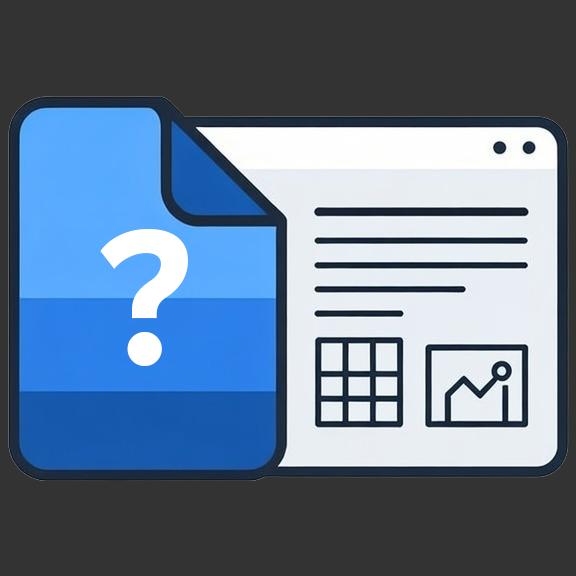
<style>
.page{position:relative;width:576px;height:576px;background:#333333}
.page>*{position:absolute;margin:0}
.t1{font:192px "CascadiaMonoRoman-Bold";color:#ffffff}
</style>
<div class="page">
<p class="t1" style="left:100px;top:229px;width:88px;height:137px">?</p>
</div>
